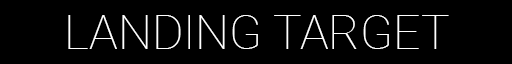
<style>
.page{position:relative;width:512px;height:64px;background:#000000}
.page>*{position:absolute;margin:0}
.t1{font:48px "Roboto-Thin";color:#ffffff;text-transform:uppercase}
</style>
<div class="page">
<p class="t1" style="left:68px;top:15px;width:381px;height:34px">LANDING TARGET</p>
</div>
